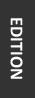
<style>
.page{position:relative;width:35px;height:98px;background:#333333}
.page>*{position:absolute;margin:0}
.t1{font:18px "Calibri-Bold";color:#ffffff}
</style>
<div class="page">
<p class="t1" style="left:10px;top:18px;width:13px;height:61px;rotate:90deg">EDITION</p>
</div>
